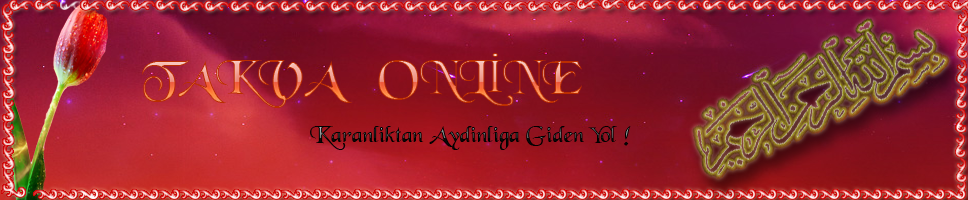
<style>
.page{position:relative;width:968px;height:200px}
.page>*{position:absolute;margin:0}
.t1{font:48px "Black-Regular"}
.t2{font:48px "TimesNewRomanPSMT"}
.t3{font:24px "Black-Regular"}
</style>
<div class="page">
<p class="t1" style="left:142px;top:53px;width:440px;height:55px">TAKVA   ONL<span class="t2">İ</span>NE</p>
<p class="t3" style="left:310px;top:126px;width:321px;height:24px">Karanliktan Aydinliga Giden Yol !</p>
</div>
